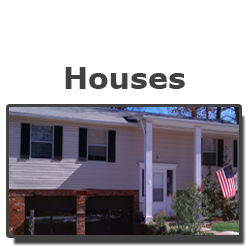
<style>
.page{position:relative;width:250px;height:250px;background:#ffffff}
.page>*{position:absolute;margin:0}
.t1{font:30px "Verdana-Bold";color:#4c4c4c}
</style>
<div class="page">
<p class="t1" style="left:65px;top:67px;width:120px;height:22px">Houses</p>
</div>
